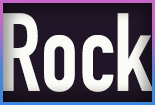
<style>
.page{position:relative;width:155px;height:105px}
.page>*{position:absolute;margin:0}
.t1{font:109px "DINCondensed-Bold";color:#fbfcf7;scale:0.92 1}
</style>
<div class="page">
<p class="t1" style="left:3px;top:13px;width:151px;height:79px">Rock</p>
</div>
